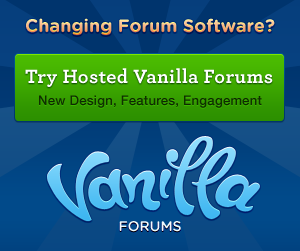
<style>
.page{position:relative;width:300px;height:251px}
.page>*{position:absolute;margin:0}
.t1{font:18px "GothamRounded-Bold"}
.t2{font:20.2px "Archer-BoldLF";letter-spacing:0.02em;color:#ffffff}
.t3{font:13.2px "HelveticaNeue-Medium";letter-spacing:0.015em;color:#103101}
.t4{font:14px "GothamRounded-Medium";color:#f1fafe}
</style>
<div class="page">
<p class="t1" style="left:26px;top:18px;width:249px;height:17px">Changing Forum Software?</p>
<p class="t2" style="left:25px;top:68px;width:248px;height:19px">Try Hosted Vanilla Forums</p>
<p class="t3" style="left:39px;top:95px;width:223px;height:13px">New Design, Features, Engagement</p>
<p class="t4" style="left:119px;top:221px;width:62px;height:11px">FORUMS</p>
</div>
